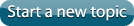
<style>
.page{position:relative;width:134px;height:26px;background:#085d79}
.page>*{position:absolute;margin:0}
.t1{font:17px "Myriad-Roman";color:#ffffff}
</style>
<div class="page">
<p class="t1" style="left:8px;top:5px;width:119px;height:16px">Start a new topic</p>
</div>
